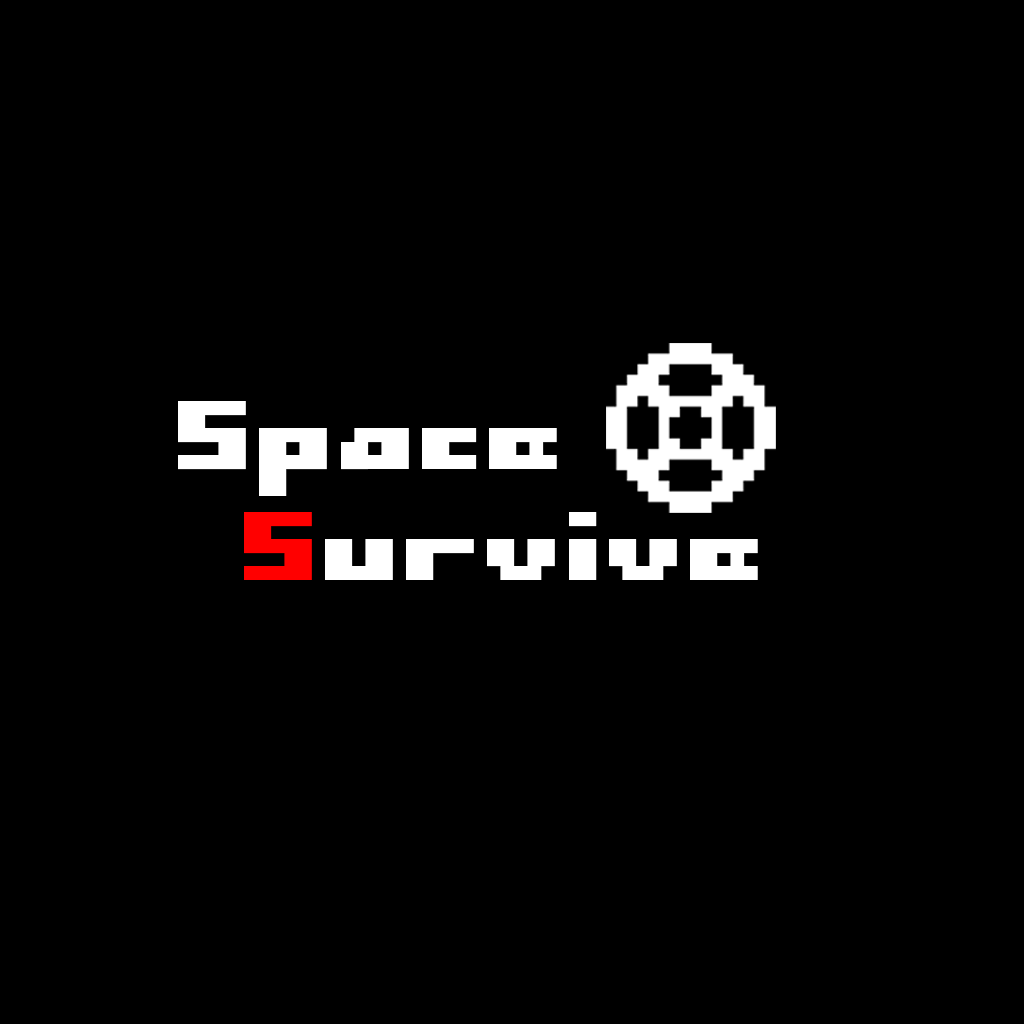
<style>
.page{position:relative;width:1024px;height:1024px;background:#000000}
.page>*{position:absolute;margin:0}
.t1{font:135.7px "SG16";color:#ffffff}
.t2{font:135.7px "SG16";color:#ff0000}
</style>
<div class="page">
<p class="t1" style="left:178px;top:401px;width:379px;height:95px">Space</p>
<p class="t1" style="left:244px;top:512px;width:514px;height:68px"><span class="t2">S</span>urvive</p>
</div>
